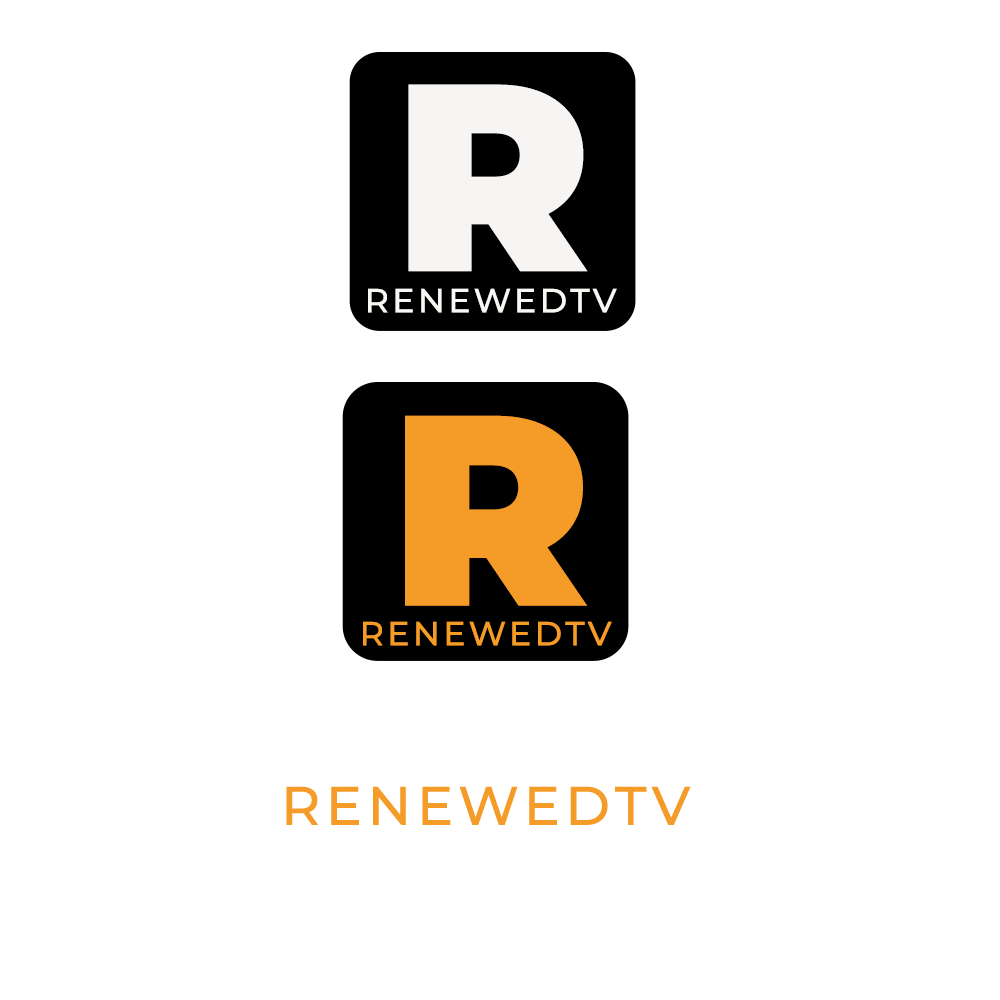
<style>
.page{position:relative;width:1000px;height:1000px;background:#ffffff}
.page>*{position:absolute;margin:0}
.t1{font:266.1px "MontserratRoman-Black";color:#f7f4f4;text-transform:uppercase}
.t2{font:33.3px "MontserratRoman-Medium";letter-spacing:0.1em;color:#f9f7f4;text-transform:uppercase}
.t3{font:270.8px "MontserratRoman-Black";color:#f49b28;text-transform:uppercase}
.t4{font:33.3px "MontserratRoman-Medium";letter-spacing:0.1em;color:#f49b28;text-transform:uppercase}
</style>
<div class="page">
<p class="t1" style="left:408px;top:84px;width:180px;height:188px">r</p>
<p class="t2" style="left:368px;top:288px;width:249px;height:25px">RENEWEDTV</p>
<p class="t3" style="left:405px;top:415px;width:182px;height:191px">r</p>
<p class="t4" style="left:363px;top:621px;width:249px;height:25px">RENEWEDTV</p>
</div>
